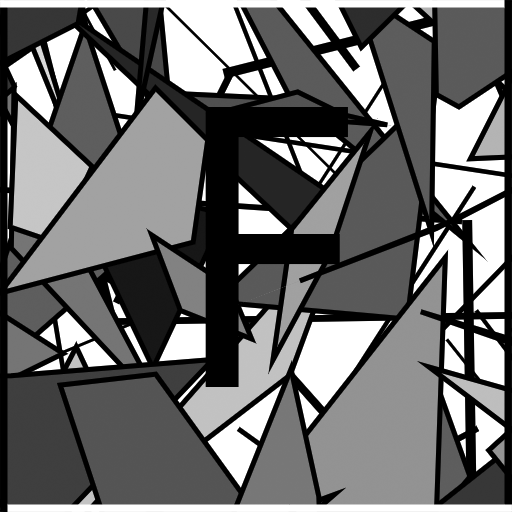
<style>
.page{position:relative;width:512px;height:512px;background:#000000}
.page>*{position:absolute;margin:0}
.t1{font:400px "Gadugi";color:#000000}
</style>
<div class="page">
<p class="t1" style="left:205px;top:107px;width:143px;height:280px">F</p>
</div>
